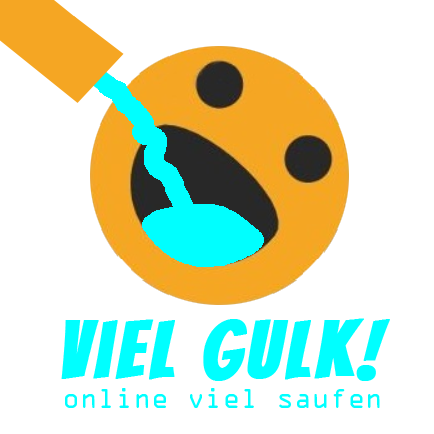
<style>
.page{position:relative;width:434px;height:434px;background:#ffffff}
.page>*{position:absolute;margin:0}
.t1{font:78.9px "Bangers-Regular";letter-spacing:0.05em;color:#00ffff;font-weight:bold}
.t2{font:25.1px "OCRAStd";color:#00ffff}
</style>
<div class="page">
<p class="t1" style="left:61px;top:318px;width:329px;height:63px">Viel Gulk!</p>
<p class="t2" style="left:65px;top:388px;width:315px;height:20px">online viel saufen</p>
</div>
